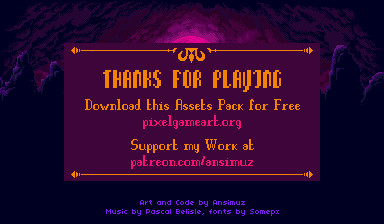
<style>
.page{position:relative;width:384px;height:224px;background:#000022}
.page>*{position:absolute;margin:0}
.t1{font:32.3px "Phantex";color:#f28300}
.t2{font:16.2px "Pleurisy";color:#f28300}
.t3{font:16.2px "Pleurisy";color:#f7106d}
.t4{font:8.1px "04b03";color:#7c1ef2}
</style>
<div class="page">
<p class="t1" style="left:103px;top:70px;width:178px;height:22px">THANKS FOR PLAYING</p>
<p class="t2" style="left:85px;top:99px;width:215px;height:11px">Download this Assets Pack for Free</p>
<p class="t3" style="left:143px;top:115px;width:98px;height:14px">pixelgameart.org</p>
<p class="t2" style="left:131px;top:139px;width:123px;height:14px">Support my Work at</p>
<p class="t3" style="left:131px;top:155px;width:122px;height:14px">patreon.com/ansimuz</p>
<p class="t4" style="left:106px;top:200px;width:173px;height:16px;text-align:center">Art and Code by Ansimuz<br>Music by Pascal Belisle, fonts by Somepx</p>
</div>
